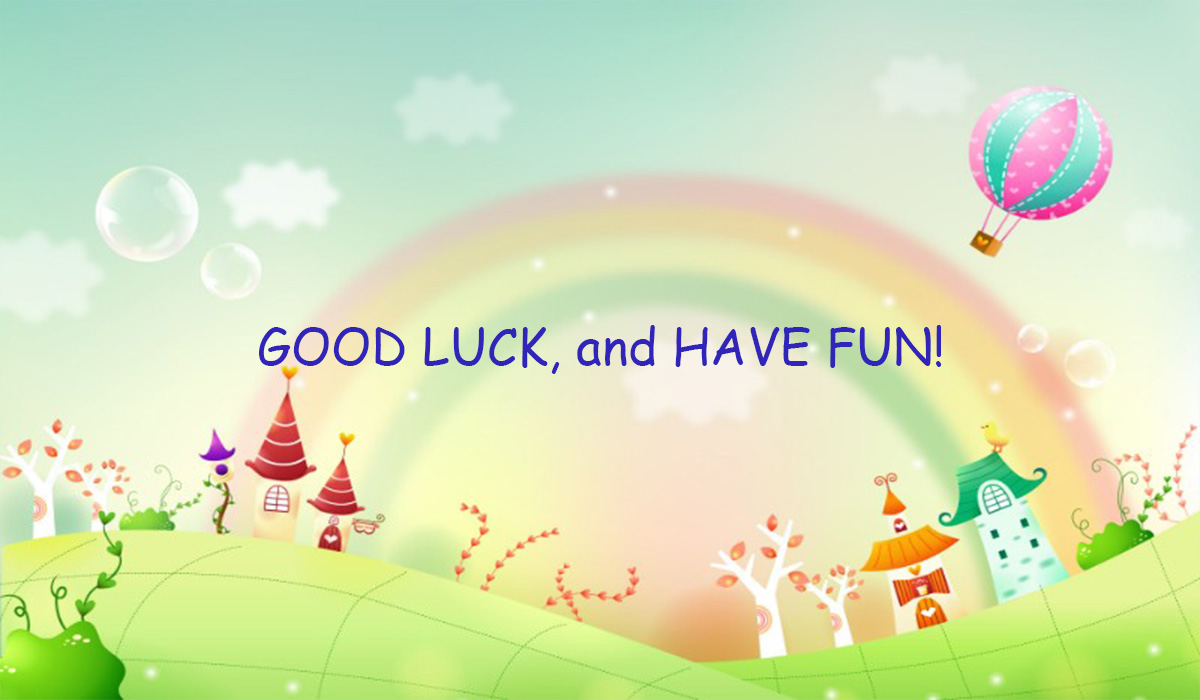
<style>
.page{position:relative;width:1200px;height:700px}
.page>*{position:absolute;margin:0}
.t1{font:12px "ComicSansMS";color:#3124b9}
</style>
<div class="page">
<p class="t1" style="left:259px;top:325px;width:683px;height:49px;text-align:center">GOOD LUCK, and HAVE FUN!</p>
</div>
